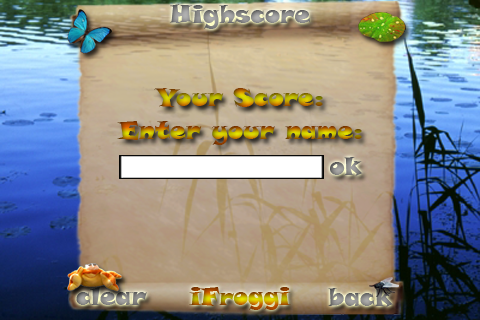
<style>
.page{position:relative;width:480px;height:320px}
.page>*{position:absolute;margin:0}
.t1{font:25px "SnapITC-Regular"}
.t2{font:24px "SnapITC-Regular"}
</style>
<div class="page">
<p class="t1" style="left:169px;top:4px;width:142px;height:25px">Highscore</p>
<p class="t1" style="left:154px;top:88px;width:169px;height:19px">Your Score:</p>
<p class="t1" style="left:117px;top:121px;width:245px;height:24px">Enter your name:</p>
<p class="t1" style="left:330px;top:157px;width:33px;height:19px">ok</p>
<p class="t2" style="left:189px;top:287px;width:102px;height:23px">iFroggi</p>
<p class="t1" style="left:328px;top:288px;width:65px;height:19px">back</p>
</div>
